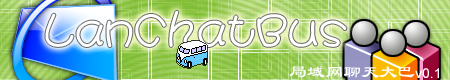
<style>
.page{position:relative;width:450px;height:80px}
.page>*{position:absolute;margin:0}
.t1{font:48px "HYj2gj";color:#ffffff}
.t2{font:18px "CTLiShuSJ";color:#ffffff}
.t3{font:14px "ArialMT";color:#ffffff}
</style>
<div class="page">
<p class="t1" style="left:45px;top:11px;width:302px;height:36px">LanChatBus</p>
<p class="t2" style="left:289px;top:66px;width:150px;height:12px">局域网聊天大巴<span class="t3">v0.1</span></p>
</div>
